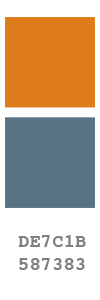
<style>
.page{position:relative;width:100px;height:300px;background:#ffffff}
.page>*{position:absolute;margin:0}
.t1{font:19px "Courier-Bold";color:#808080}
</style>
<div class="page">
<p class="t1" style="left:18px;top:235px;width:68px;height:35px">DE7C1B<br>587383</p>
</div>
